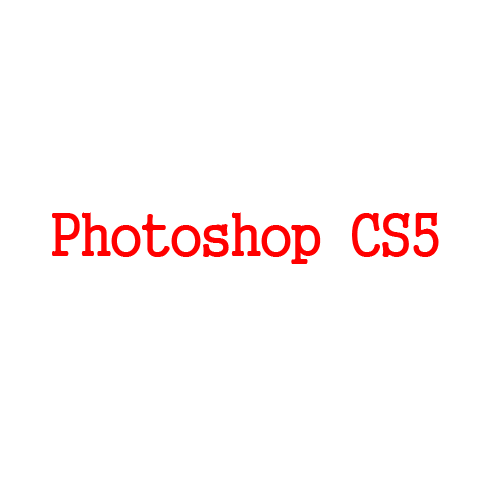
<style>
.page{position:relative;width:500px;height:500px;background:#ffffff}
.page>*{position:absolute;margin:0}
.t1{font:60px "GungsuhChe";color:#ff0000}
</style>
<div class="page">
<p class="t1" style="left:52px;top:212px;width:387px;height:52px">Photoshop CS5</p>
</div>
